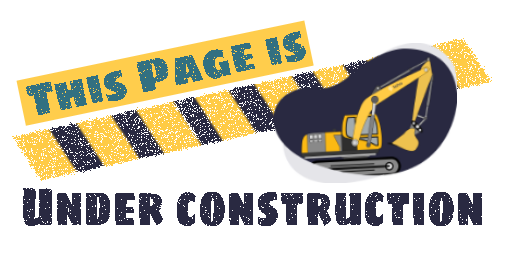
<style>
.page{position:relative;width:512px;height:256px;background:#ffffff}
.page>*{position:absolute;margin:0}
.t1{font:46.4px "SigmarOne-Regular";color:#327082;scale:0.84 1}
.t2{font:54.2px "SigmarOne-Regular";color:#292941;scale:0.69 1}
</style>
<div class="page">
<p class="t1" style="left:26px;top:31px;width:280px;height:84px;rotate:-12deg">This Page is</p>
<p class="t2" style="left:23px;top:188px;width:459px;height:38px">Under construction</p>
</div>
